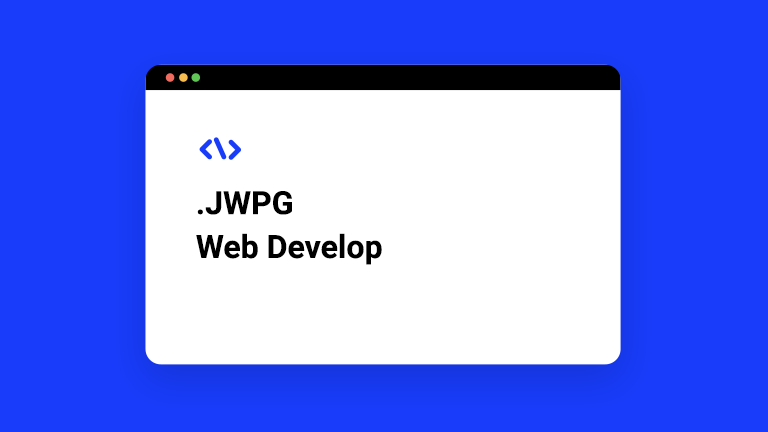
<style>
.page{position:relative;width:768px;height:432px;background:#183cfa}
.page>*{position:absolute;margin:0}
.t1{font:32px/43.8px "Roboto-Bold";color:#000000}
</style>
<div class="page">
<p class="t1" style="left:196px;top:191px;width:186px;height:74px">.JWPG<br>Web Develop</p>
</div>
